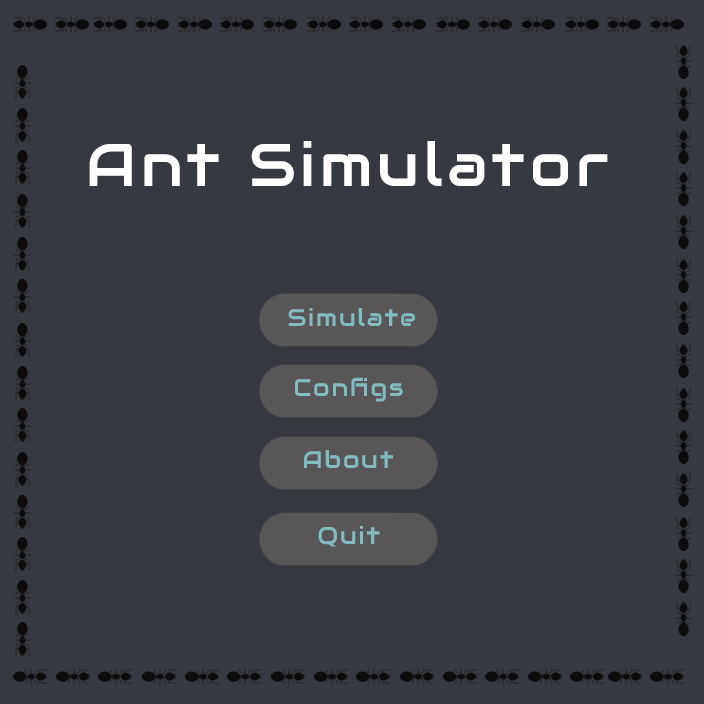
<style>
.page{position:relative;width:704px;height:704px;background:#36393f}
.page>*{position:absolute;margin:0}
.t1{font:60px "Audiowide-Regular";letter-spacing:0.08em;color:#ffffff}
.t2{font:24px "Audiowide-Regular";letter-spacing:0.08em;color:#7babae}
.t3{font:24px "Audiowide-Regular";letter-spacing:0.08em;color:#82bcc0}
</style>
<div class="page">
<p class="t1" style="left:89px;top:141px;width:519px;height:45px">Ant Simulator</p>
<p class="t2" style="left:288px;top:309px;width:127px;height:18px">Simulate</p>
<p class="t3" style="left:288px;top:308px;width:127px;height:18px">Simulate</p>
<p class="t3" style="left:295px;top:377px;width:108px;height:25px">Configs</p>
<p class="t2" style="left:294px;top:378px;width:109px;height:25px">Configs</p>
<p class="t2" style="left:303px;top:451px;width:90px;height:18px">About</p>
<p class="t3" style="left:304px;top:450px;width:89px;height:18px">About</p>
<p class="t3" style="left:318px;top:526px;width:62px;height:21px">Quit</p>
<p class="t2" style="left:319px;top:527px;width:62px;height:21px">Quit</p>
</div>
